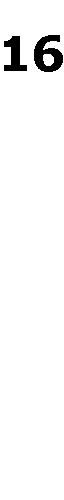
<style>
.page{position:relative;width:64px;height:500px;background:#ffffff}
.page>*{position:absolute;margin:0}
.t1{font:48px "Verdana-Bold";color:#000000}
</style>
<div class="page">
<p class="t1" style="left:4px;top:35px;width:59px;height:37px">16</p>
</div>
